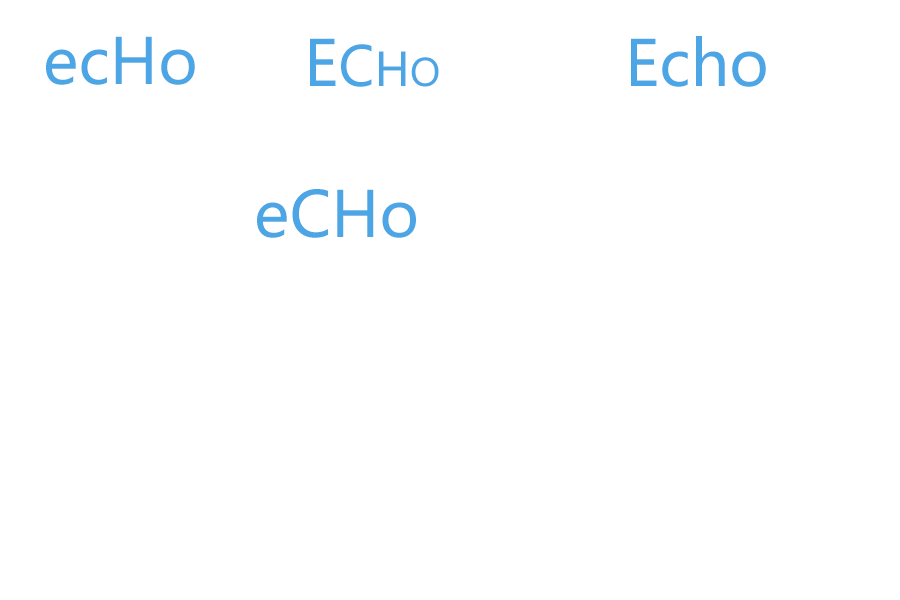
<style>
.page{position:relative;width:900px;height:600px;background:#ffffff}
.page>*{position:absolute;margin:0}
.t1{font:62.5px "MicrosoftYaHei";color:#4ca5e4}
.t2{font:54.2px "MicrosoftYaHei";color:#4ca5e4}
.t3{font:45.8px "MicrosoftYaHei";color:#4ca5e4}
.t4{font:37.5px "MicrosoftYaHei";color:#4ca5e4}
</style>
<div class="page">
<p class="t1" style="left:46px;top:36px;width:149px;height:49px">ecHo</p>
<p class="t1" style="left:310px;top:38px;width:129px;height:49px">E<span class="t2">C</span><span class="t3">H</span><span class="t4">O</span></p>
<p class="t1" style="left:631px;top:36px;width:135px;height:51px">Echo</p>
<p class="t1" style="left:257px;top:189px;width:159px;height:49px">eCHo</p>
</div>
